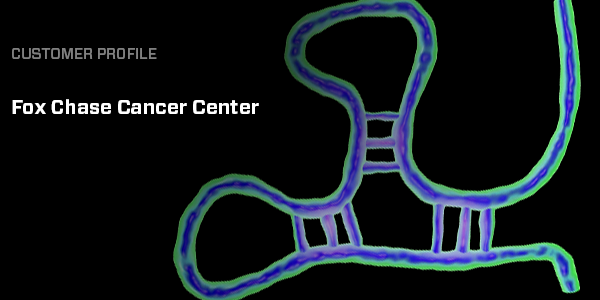
<style>
.page{position:relative;width:600px;height:300px;background:#000000}
.page>*{position:absolute;margin:0}
.t1{font:15px "Forza-Medium";color:#808080;text-transform:uppercase}
.t2{font:20px "Forza-Bold";letter-spacing:-0.005em;color:#ffffff}
</style>
<div class="page">
<p class="t1" style="left:12px;top:48px;width:145px;height:11px">Customer Profile</p>
<p class="t2" style="left:12px;top:99px;width:247px;height:15px">Fox Chase Cancer Center</p>
</div>
